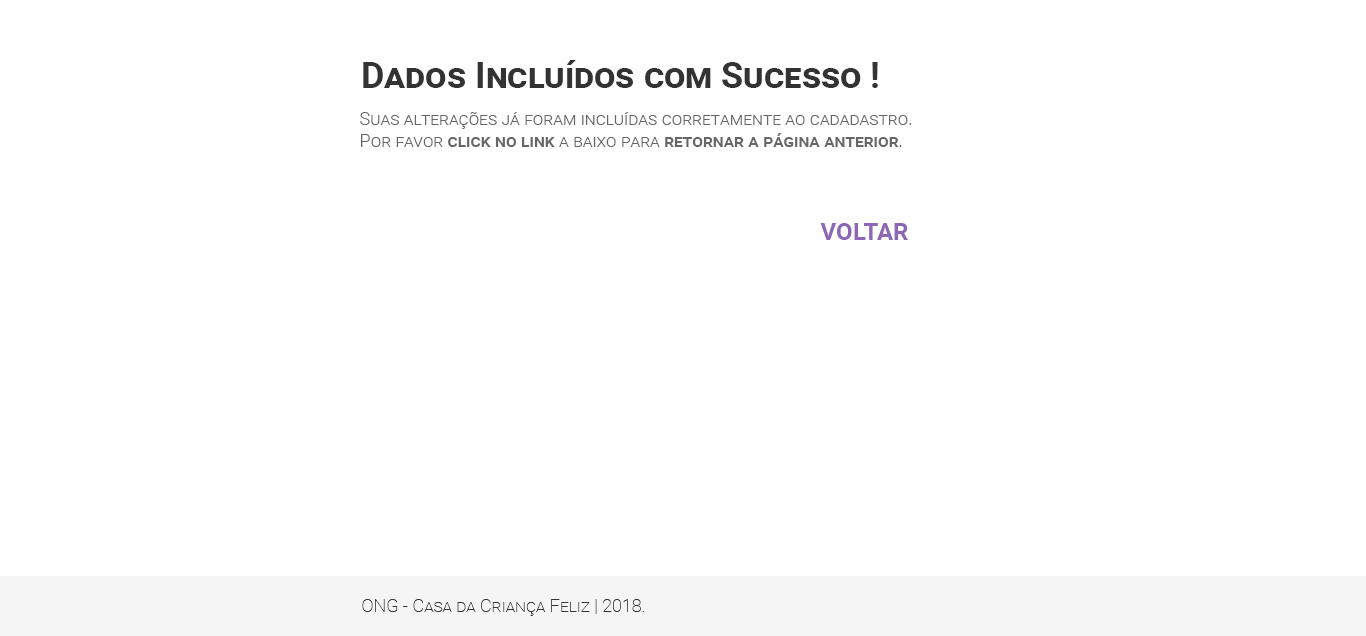
<style>
.page{position:relative;width:1366px;height:636px;background:#ffffff}
.page>*{position:absolute;margin:0}
.t1{font:36px "Roboto-Bold";color:#333333;font-variant:small-caps}
.t2{font:18px "Roboto-Light";color:#666666;font-variant:small-caps}
.t3{font:18px "Roboto-Medium";color:#666666;font-variant:small-caps}
.t4{font:24px "Roboto-Bold";color:#8d66b6;font-variant:small-caps}
.t5{font:18px "Roboto-Thin";color:#333333;font-variant:small-caps}
</style>
<div class="page">
<p class="t1" style="left:363px;top:60px;width:515px;height:28px">Dados Incluídos com Sucesso !</p>
<p class="t2" style="left:360px;top:112px;width:552px;height:35px">Suas alterações já foram incluídas corretamente ao cadadastro.<br>Por favor <span class="t3">click no link</span> a baixo para <span class="t3">retornar a página anterior</span>.</p>
<p class="t4" style="left:820px;top:223px;width:88px;height:17px">VOLTAR</p>
<p class="t5" style="left:362px;top:599px;width:282px;height:17px">ONG - Casa da Criança Feliz | 2018.</p>
</div>
